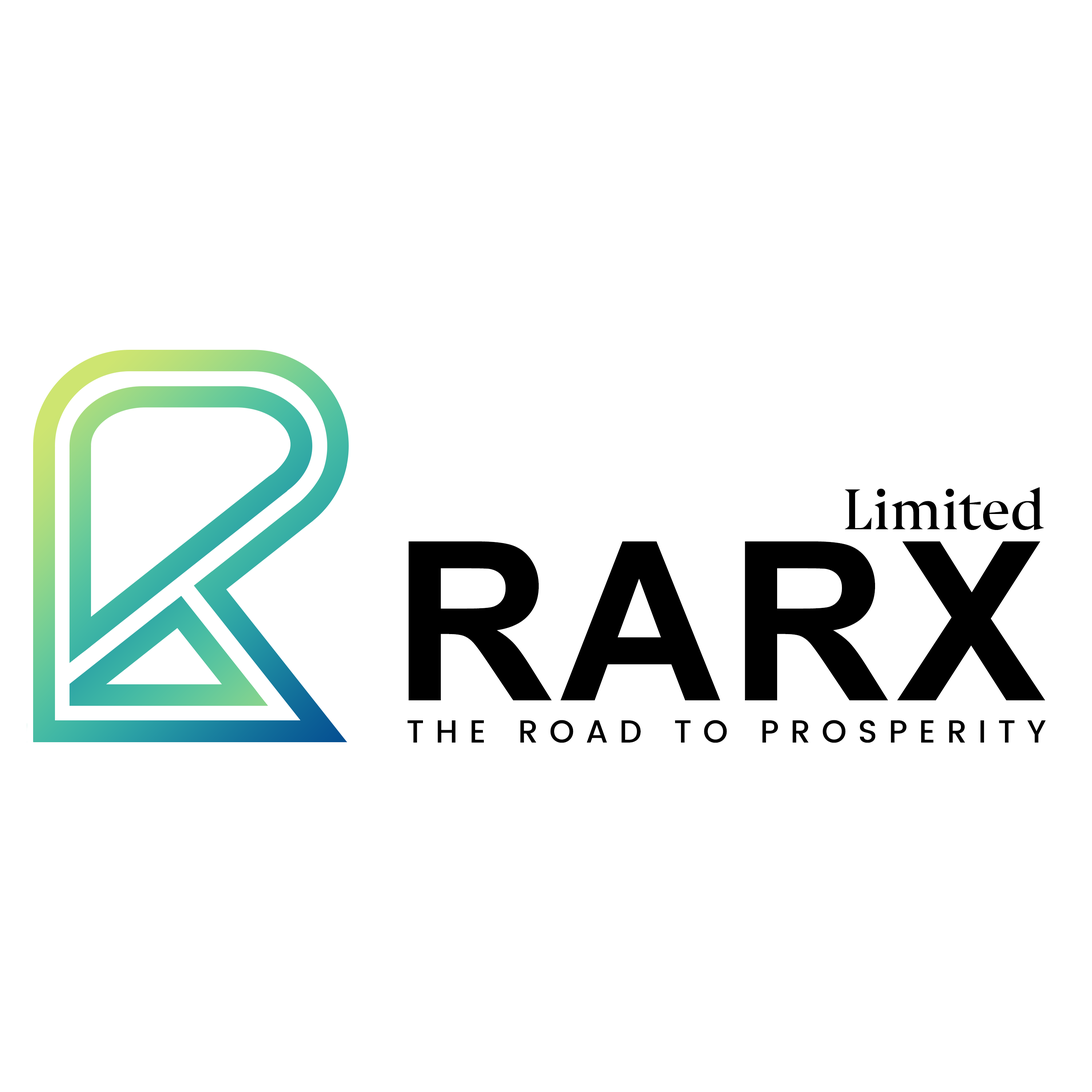
<style>
.page{position:relative;width:1092px;height:1092px;background:#ffffff}
.page>*{position:absolute;margin:0}
.t1{font:53.1px "AriataDisplay-Regular";color:#000000}
.t2{font:222.1px "Arial-BoldMT";color:#000000;text-transform:uppercase}
.t3{font:32px "Poppins-Medium";letter-spacing:0.35em;color:#000000;text-transform:uppercase}
</style>
<div class="page">
<p class="t1" style="left:845px;top:487px;width:199px;height:43px">Limited</p>
<p class="t2" style="left:408px;top:541px;width:637px;height:159px">Rarx</p>
<p class="t3" style="left:407px;top:720px;width:639px;height:23px">The road to prosperity</p>
</div>
